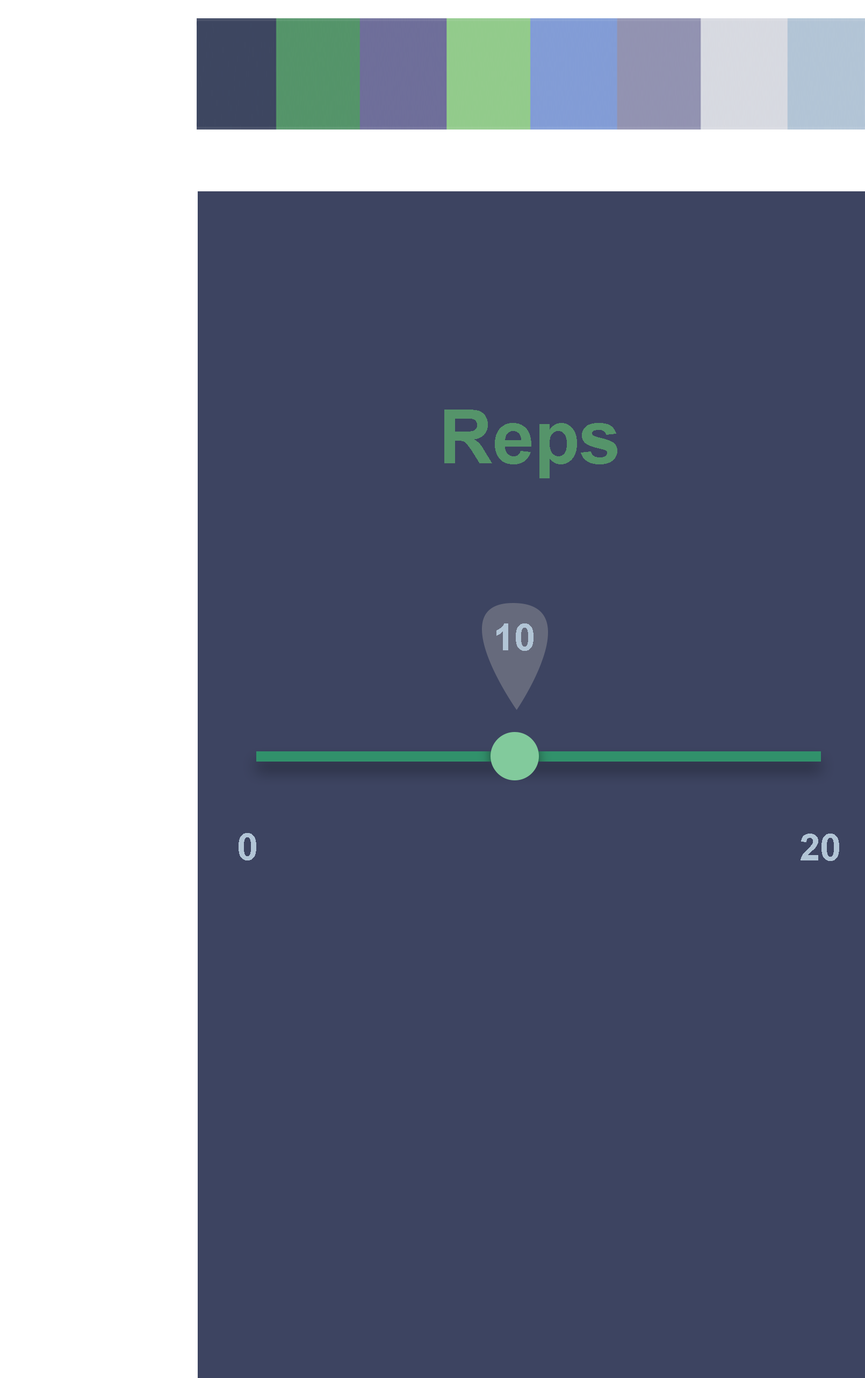
<style>
.page{position:relative;width:865px;height:1378px;background:#3d4461}
.page>*{position:absolute;margin:0}
.t1{font:74.7px "Arial-BoldMT";color:#55946a}
.t2{font:37.6px "Arial-BoldMT";color:#b2c5d6}
</style>
<div class="page">
<p class="t1" style="left:444px;top:410px;width:174px;height:68px">Reps</p>
<p class="t2" style="left:497px;top:623px;width:37px;height:28px">10</p>
<p class="t2" style="left:239px;top:833px;width:17px;height:27px">0</p>
<p class="t2" style="left:801px;top:834px;width:39px;height:27px">20</p>
</div>
